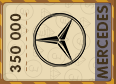
<style>
.page{position:relative;width:116px;height:84px;background:#eadab4}
.page>*{position:absolute;margin:0}
.t1{font:15px "RotondaC-Bold";letter-spacing:0.04em;color:#43341d;text-transform:uppercase}
</style>
<div class="page">
<p class="t1" style="left:97px;top:5px;width:11px;height:74px;rotate:-90deg">mercedes</p>
<p class="t1" style="left:10px;top:13px;width:11px;height:60px;rotate:-90deg">350 000</p>
</div>
